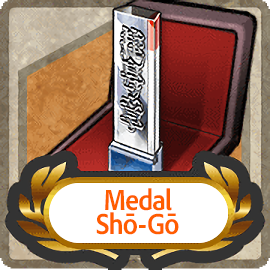
<style>
.page{position:relative;width:270px;height:270px}
.page>*{position:absolute;margin:0}
.t1{font:30px/24px "AdobeClean-Bold";letter-spacing:-0.04em;color:#ff5d00;scale:0.9 1}
</style>
<div class="page">
<p class="t1" style="left:96px;top:188px;width:83px;height:47px;text-align:center">Medal<br>Shō-Gō</p>
</div>
